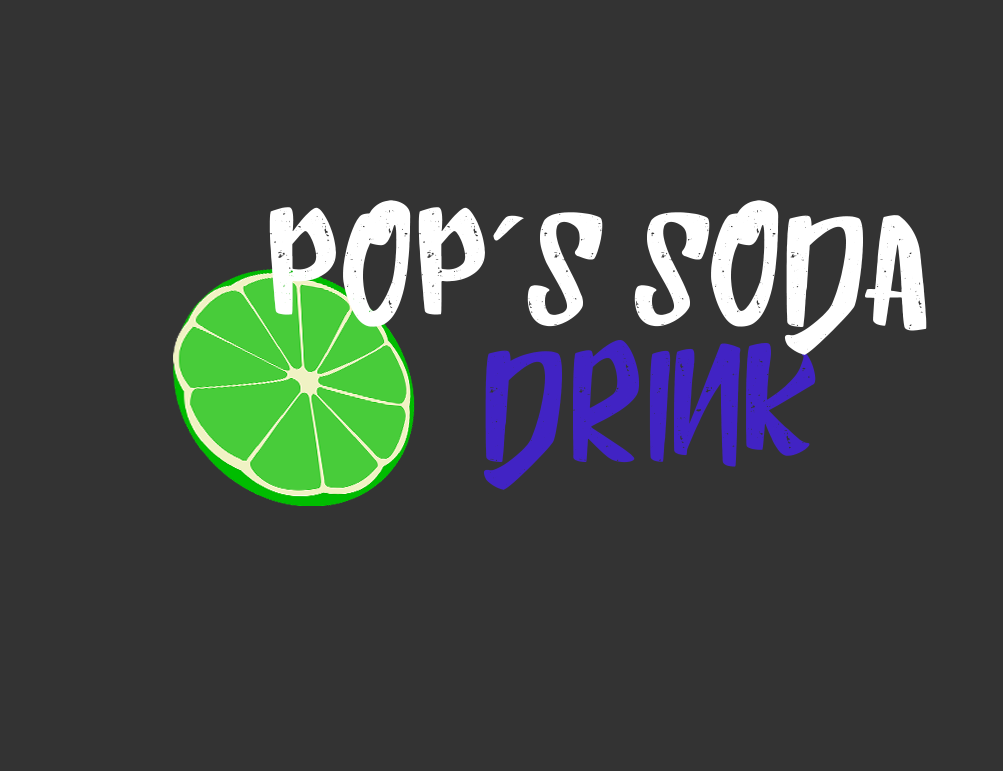
<style>
.page{position:relative;width:1003px;height:771px;background:#333333}
.page>*{position:absolute;margin:0}
.t1{font:150px "HumblleRoughtAllCaps";color:#ffffff}
.t2{font:150px "HumblleRoughtAllCaps";color:#4123c4}
</style>
<div class="page">
<p class="t1" style="left:269px;top:200px;width:658px;height:155px">PoP´s Soda</p>
<p class="t2" style="left:483px;top:340px;width:333px;height:150px">DRINK</p>
</div>
